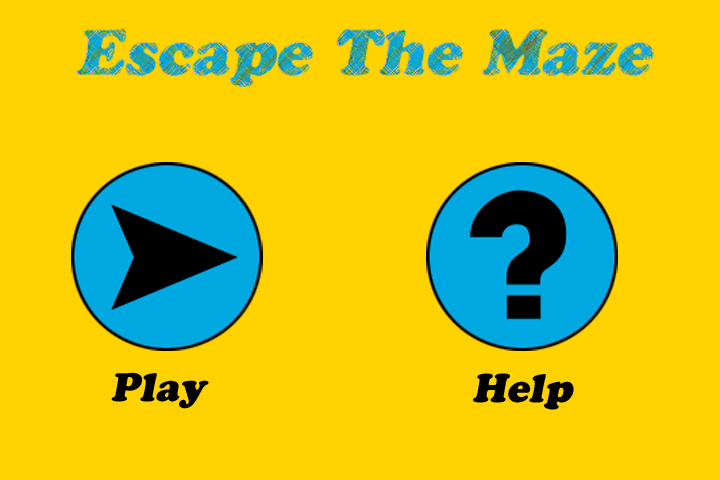
<style>
.page{position:relative;width:720px;height:480px;background:#ffd200}
.page>*{position:absolute;margin:0}
.t1{font:39.9px "CooperBlackStd";color:#000000;font-style:italic}
</style>
<div class="page">
<p class="t1" style="left:111px;top:372px;width:98px;height:37px">Play</p>
<p class="t1" style="left:473px;top:373px;width:101px;height:37px">Help</p>
</div>
